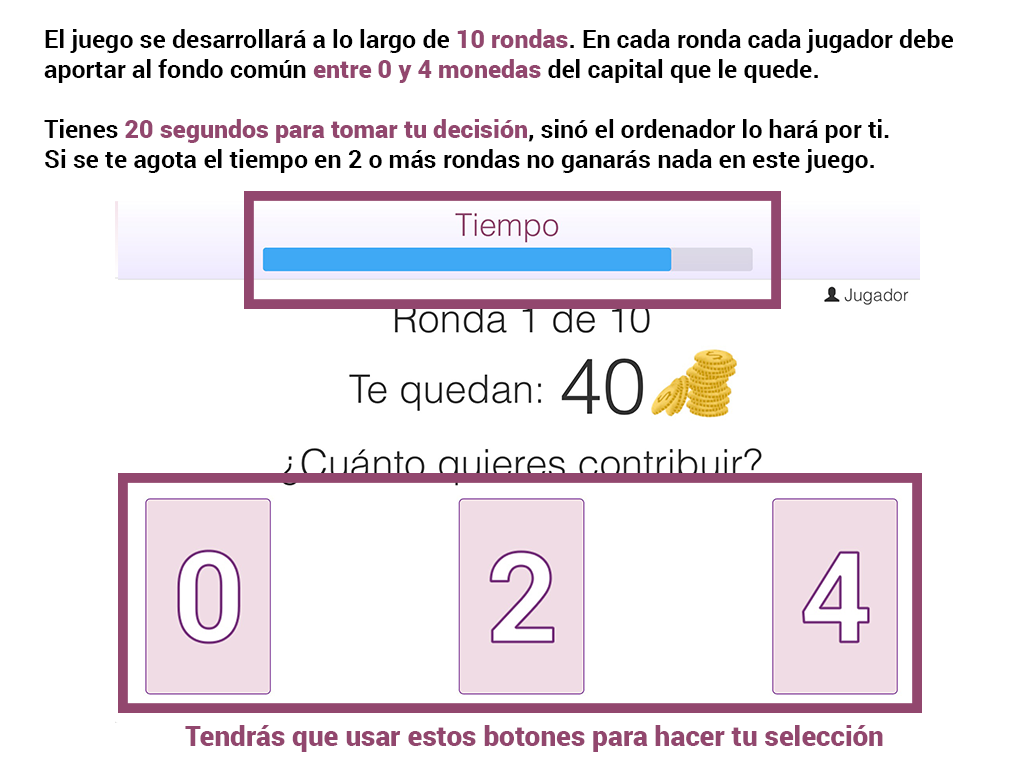
<style>
.page{position:relative;width:1024px;height:768px;background:#ffffff}
.page>*{position:absolute;margin:0}
.t1{font:25px "Roboto-Bold";color:#000000}
.t2{font:25px "Roboto-Black";color:#92476e}
.t3{font:28px "Roboto-Black";color:#92476e}
</style>
<div class="page">
<p class="t1" style="left:44px;top:29px;width:909px;height:144px">El juego se desarrollará a lo largo de <span class="t2">10 rondas</span>. En cada ronda cada jugador debe<br>aportar al fondo común <span class="t2">entre 0 y 4 monedas </span>del capital que le quede.  <br><br>Tienes <span class="t2">20 segundos para tomar tu decisión</span>, sinó el ordenador lo hará por ti.<br>Si se te agota el tiempo en 2 o más rondas no ganarás nada en este juego.</p>
<p class="t3" style="left:185px;top:725px;width:698px;height:27px">Tendrás que usar estos botones para hacer tu selección</p>
</div>
